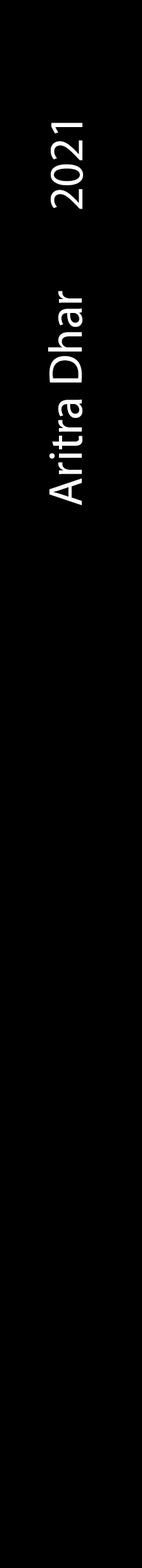
<style>
.page{position:relative;width:142px;height:1568px;background:#000000}
.page>*{position:absolute;margin:0}
.t1{font:47.4px "MyriadPro-Regular";color:#ffffff}
</style>
<div class="page">
<p class="t1" style="left:51px;top:123px;width:32px;height:86px;rotate:-90deg">2021</p>
<p class="t1" style="left:48px;top:291px;width:34px;height:214px;rotate:-90deg">Aritra Dhar</p>
</div>
